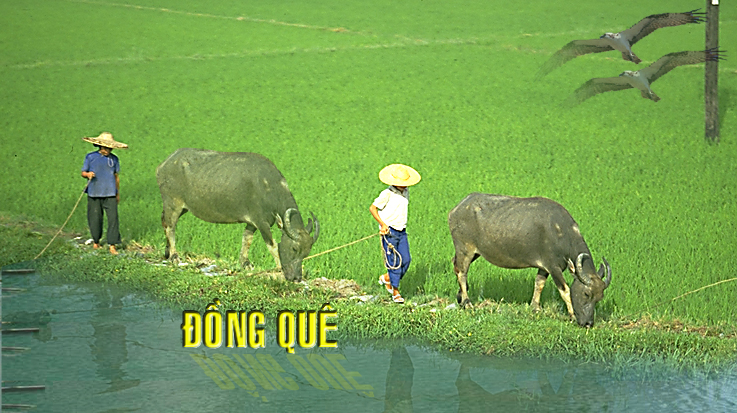
<style>
.page{position:relative;width:737px;height:413px}
.page>*{position:absolute;margin:0}
.t1{font:48px "VNI-Swiss-Condense";letter-spacing:-0.01em}
.t2{font:65.5px "VNI-Swiss-Condense";letter-spacing:-0.01em;color:#75995e;scale:0.73 1}
</style>
<div class="page">
<p class="t1" style="left:181px;top:299px;width:156px;height:54px">ÑOÀNG QUEÂ</p>
<p class="t2" style="left:188px;top:348px;width:187px;height:54px">ÑOÀNG QUEÂ</p>
</div>
